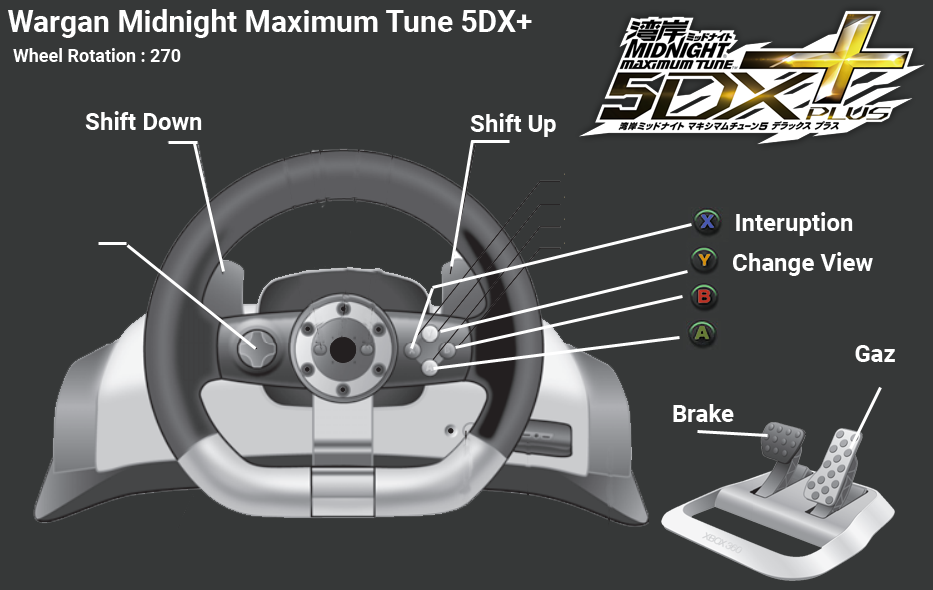
<style>
.page{position:relative;width:933px;height:590px;background:#363838}
.page>*{position:absolute;margin:0}
.t1{font:30px "Roboto-Bold";color:#ffffff}
.t2{font:18px "Roboto-Bold";color:#ffffff}
.t3{font:24px "Roboto-Bold";color:#ffffff}
</style>
<div class="page">
<p class="t1" style="left:8px;top:9px;width:524px;height:29px">Wargan Midnight Maximum Tune 5DX+</p>
<p class="t2" style="left:13px;top:48px;width:168px;height:14px">Wheel Rotation : 270</p>
<p class="t3" style="left:85px;top:111px;width:117px;height:19px">Shift Down</p>
<p class="t3" style="left:470px;top:113px;width:86px;height:24px">Shift Up</p>
<p class="t3" style="left:736px;top:212px;width:117px;height:24px">Interuption</p>
<p class="t3" style="left:733px;top:252px;width:140px;height:24px">Change View</p>
<p class="t3" style="left:855px;top:345px;width:40px;height:17px">Gaz</p>
<p class="t3" style="left:673px;top:404px;width:61px;height:18px">Brake</p>
</div>
